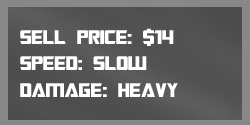
<style>
.page{position:relative;width:250px;height:125px}
.page>*{position:absolute;margin:0}
.t1{font:22px "TransformersMovie";color:#ffffff}
.t2{font:22px "TransformersMovie";letter-spacing:0.02em;color:#ffffff}
</style>
<div class="page">
<p class="t1" style="left:20px;top:28px;width:158px;height:69px">sell price: $14<br>spee<span class="t2">d</span>: slow<br>dama<span class="t2">ge</span>: heavy</p>
</div>
